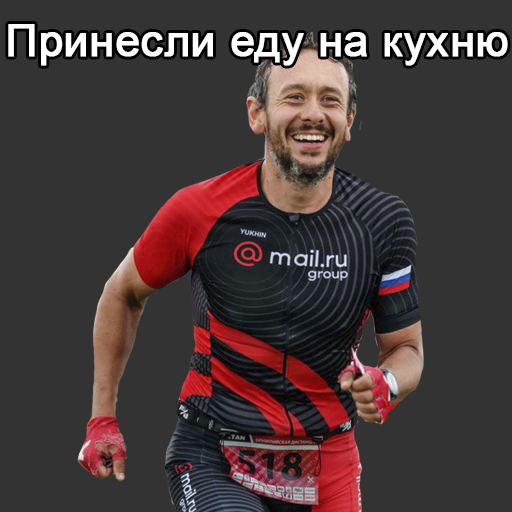
<style>
.page{position:relative;width:512px;height:512px;background:#333333}
.page>*{position:absolute;margin:0}
.t1{font:44px "ArialMT";color:#ffffff;font-weight:bold}
</style>
<div class="page">
<p class="t1" style="left:8px;top:24px;width:500px;height:42px">Принесли еду на кухню</p>
</div>
